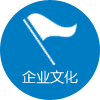
<style>
.page{position:relative;width:100px;height:100px;background:#007cc2}
.page>*{position:absolute;margin:0}
.t1{font:14px "FZY3JW--GB1-0";color:#ffffff}
</style>
<div class="page">
<p class="t1" style="left:22px;top:70px;width:56px;height:14px">企业文化</p>
</div>
